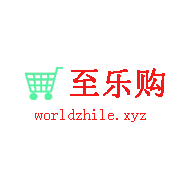
<style>
.page{position:relative;width:190px;height:170px;background:#ffffff}
.page>*{position:absolute;margin:0}
.t1{font:32px "SimSun";color:#f11a18;text-transform:uppercase;font-weight:bold}
.t2{font:16px "SimSun";color:#f11a18}
</style>
<div class="page">
<p class="t1" style="left:70px;top:68px;width:95px;height:30px">至乐购</p>
<p class="t2" style="left:35px;top:109px;width:111px;height:13px">worldzhile.xyz</p>
</div>
